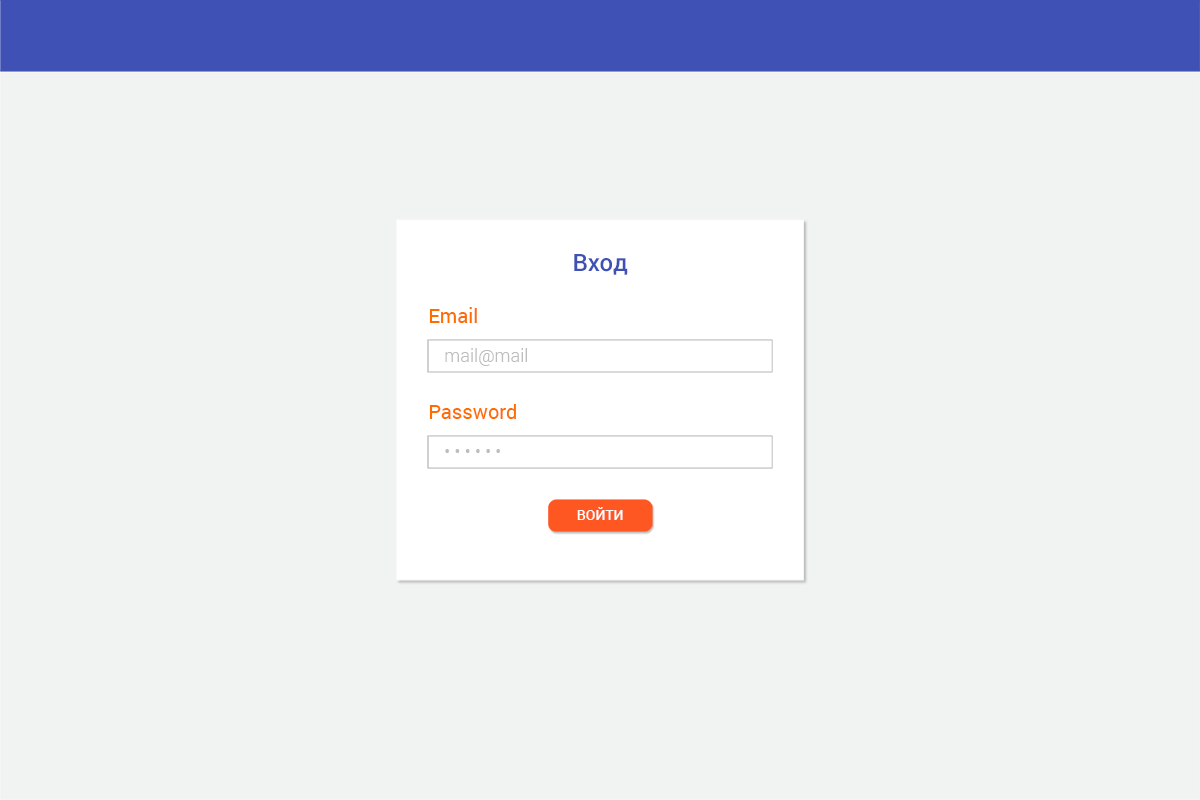
<style>
.page{position:relative;width:1200px;height:800px;background:#f1f2f2}
.page>*{position:absolute;margin:0}
.t1{font:24px "Roboto-Medium";color:#3f51b5}
.t2{font:20px "Roboto-Regular";color:#ff6c00}
.t3{font:18px "Roboto-Light";color:#bdbdbd}
.t4{font:14px "Roboto-Medium";letter-spacing:0.005em;color:#ffffff;text-transform:uppercase}
</style>
<div class="page">
<p class="t1" style="left:574px;top:254px;width:54px;height:21px">Вход</p>
<p class="t2" style="left:429px;top:307px;width:48px;height:16px">Email</p>
<p class="t3" style="left:445px;top:348px;width:82px;height:18px">mail@mail</p>
<p class="t2" style="left:429px;top:404px;width:87px;height:15px">Password</p>
<p class="t3" style="left:445px;top:449px;width:55px;height:4px">• • • • • •</p>
<p class="t4" style="left:577px;top:507px;width:46px;height:13px">Войти</p>
</div>
